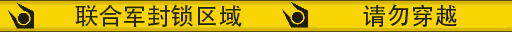
<style>
.page{position:relative;width:512px;height:32px;background:#f8d500}
.page>*{position:absolute;margin:0}
.t1{font:24px "AdobeHeitiStd-Regular";color:#282400}
.t2{font:24px "AdobeHeitiStd-Regular";color:#202000}
</style>
<div class="page">
<p class="t1" style="left:75px;top:4px;width:167px;height:23px">联合军封锁区域</p>
<p class="t2" style="left:363px;top:4px;width:94px;height:23px">请勿穿越</p>
</div>
